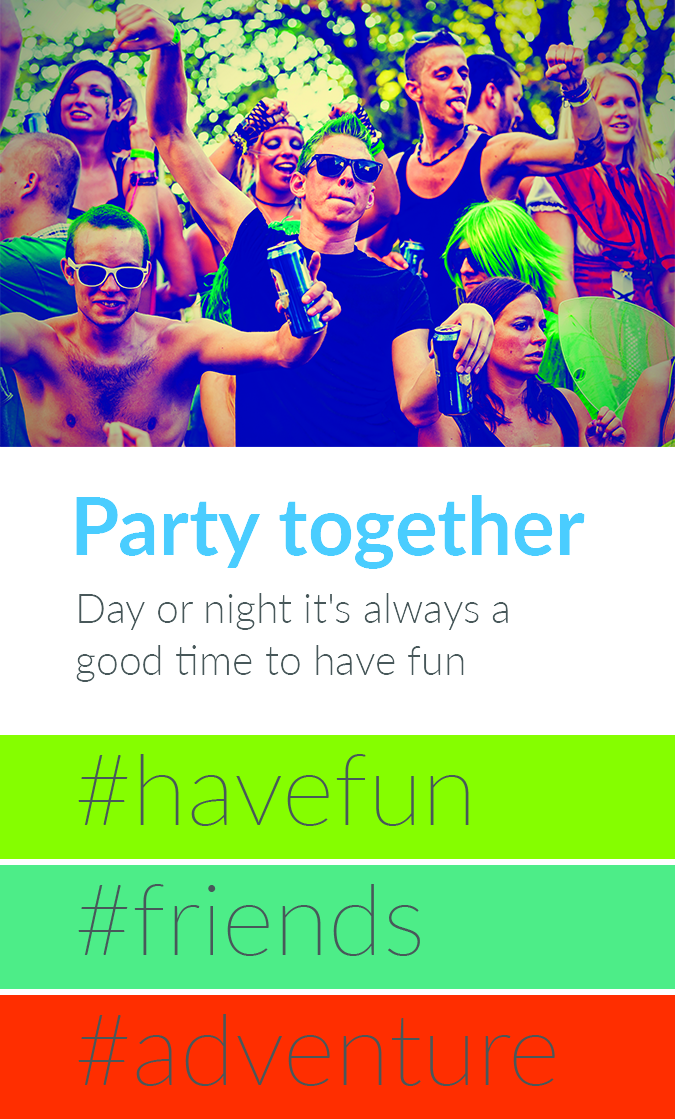
<style>
.page{position:relative;width:675px;height:1119px;background:#ffffff}
.page>*{position:absolute;margin:0}
.t1{font:80px "Lato-Bold";color:#4acdff}
.t2{font:41px/52px "Lato-Light";color:#48585a}
</style>
<div class="page">
<p class="t1" style="left:76px;top:495px;width:509px;height:74px">Party together</p>
<p class="t2" style="left:76px;top:593px;width:432px;height:89px;text-align:right">Day or night it's always a good time to have fun</p>
</div>
